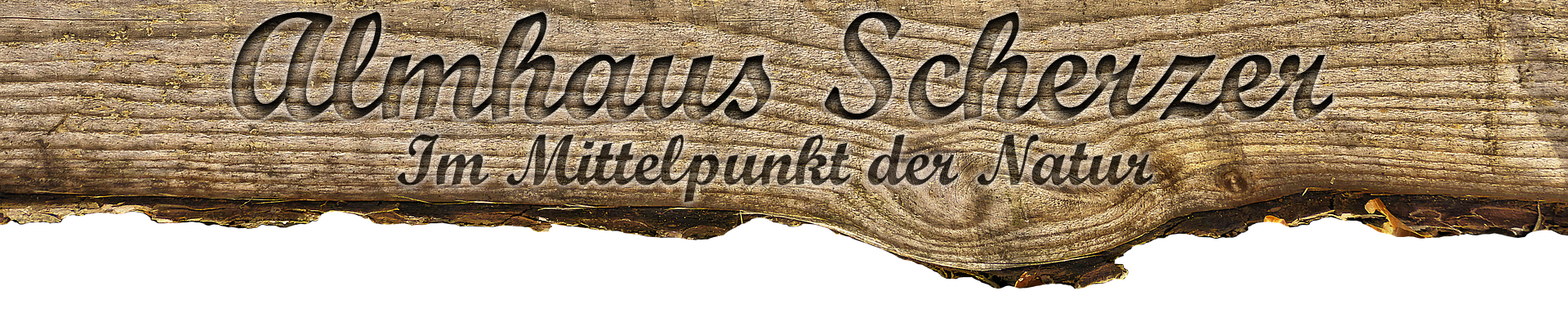
<style>
.page{position:relative;width:1568px;height:309px;background:#ffffff}
.page>*{position:absolute;margin:0}
.t1{font:152.1px "ScriptMTBold"}
.t2{font:71.5px "ScriptMTBold"}
</style>
<div class="page">
<p class="t1" style="left:231px;top:11px;width:1102px;height:109px">Almhaus Scherzer</p>
<p class="t2" style="left:398px;top:134px;width:755px;height:69px">Im Mittelpunkt der Natur</p>
</div>
